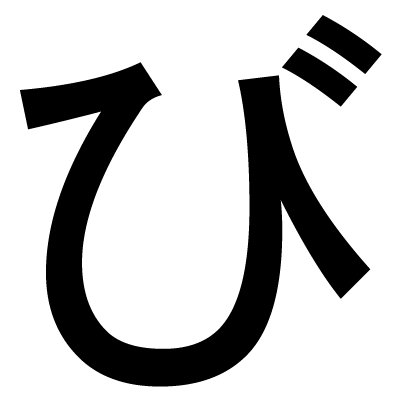
<style>
.page{position:relative;width:400px;height:400px;background:#ffffff}
.page>*{position:absolute;margin:0}
.t1{font:416.7px "MS-PGothic";color:#000000}
</style>
<div class="page">
<p class="t1" style="left:20px;top:15px;width:362px;height:372px">び</p>
</div>
